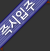
<style>
.page{position:relative;width:50px;height:51px;background:#333333}
.page>*{position:absolute;margin:0}
.t1{font:12.5px "NanumBarunGothicBold";letter-spacing:0.01em;color:#ffffff;text-transform:uppercase}
</style>
<div class="page">
<p class="t1" style="left:0px;top:0px;width:35px;height:36px;rotate:-45deg">즉시입주</p>
</div>
